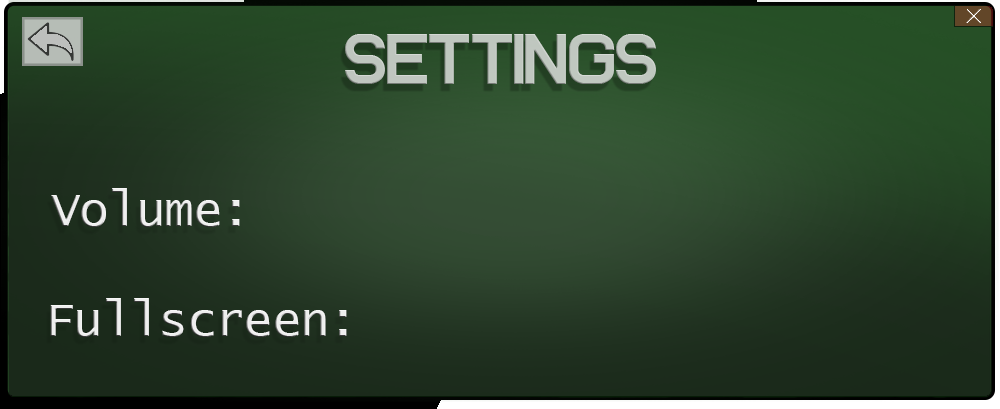
<style>
.page{position:relative;width:1000px;height:409px}
.page>*{position:absolute;margin:0}
.t1{font:71.1px "Alenia";letter-spacing:-0.025em;color:#c0c7c0}
.t2{font:49.1px "LucidaConsole";letter-spacing:-0.025em;color:#ffffff}
</style>
<div class="page">
<p class="t1" style="left:345px;top:34px;width:311px;height:50px">SETTINGS</p>
<p class="t2" style="left:51px;top:188px;width:189px;height:39px">Volume:</p>
<p class="t2" style="left:50px;top:298px;width:297px;height:39px">Fullscreen:</p>
</div>
